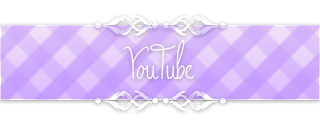
<style>
.page{position:relative;width:320px;height:125px;background:#ffffff}
.page>*{position:absolute;margin:0}
.t1{font:60px "Madison";color:#ffffff}
</style>
<div class="page">
<p class="t1" style="left:123px;top:40px;width:72px;height:40px">YouTube</p>
</div>
